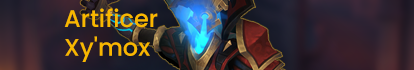
<style>
.page{position:relative;width:414px;height:70px}
.page>*{position:absolute;margin:0}
.t1{font:24px "Poppins-Medium";color:#f8b700}
</style>
<div class="page">
<p class="t1" style="left:64px;top:8px;width:94px;height:54px">Artificer <br>Xy'mox</p>
</div>
